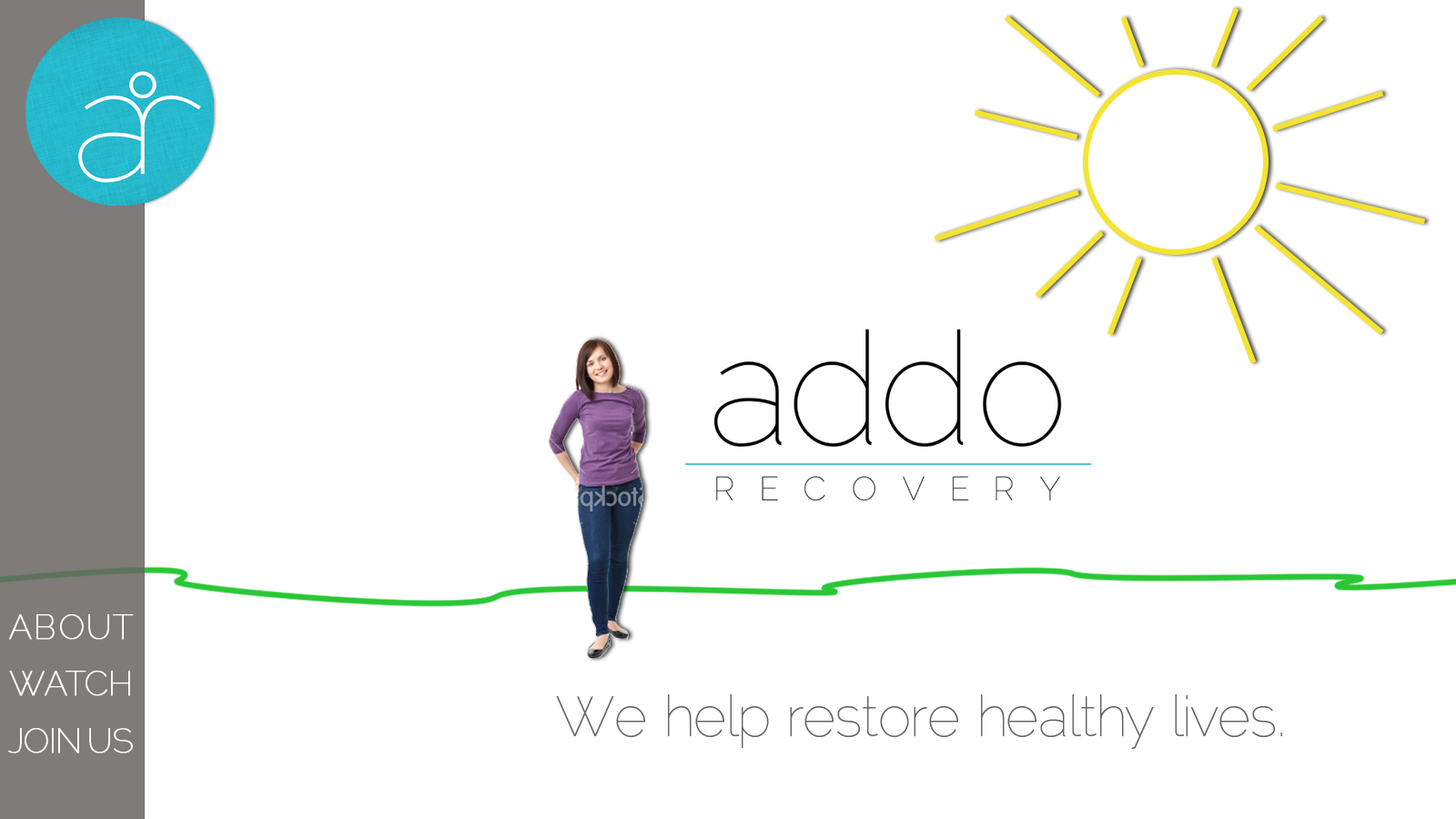
<style>
.page{position:relative;width:1456px;height:819px;background:#ffffff}
.page>*{position:absolute;margin:0}
.t1{font:34.1px/56.9px "Raleway-Thin";letter-spacing:-0.02em;color:#ffffff;font-weight:bold}
.t2{font:34.1px/56.9px "Raleway-Thin";letter-spacing:0.04em;color:#ffffff;font-weight:bold}
.t3{font:34.1px/56.9px "Raleway-Thin";letter-spacing:-0.08em;color:#ffffff;font-weight:bold}
.t4{font:34.1px/56.9px "Raleway-Thin";letter-spacing:-0.04em;color:#ffffff;font-weight:bold}
.t5{font:56.9px "Raleway-Thin";letter-spacing:-0.02em;color:#676462}
</style>
<div class="page">
<p class="t1" style="left:8px;top:614px;width:126px;height:139px"><span class="t2">ABOUT<br></span><span class="t3">WA</span><span class="t4">T</span>CH<br>JOIN US</p>
<p class="t5" style="left:556px;top:694px;width:726px;height:55px">We help restore healthy lives.</p>
</div>
